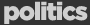
<style>
.page{position:relative;width:90px;height:25px;background:#333333}
.page>*{position:absolute;margin:0}
.t1{font:25px "GothamBlack";letter-spacing:-0.05em;color:#cfcfcf}
</style>
<div class="page">
<p class="t1" style="left:4px;top:1px;width:84px;height:23px">politics</p>
</div>
